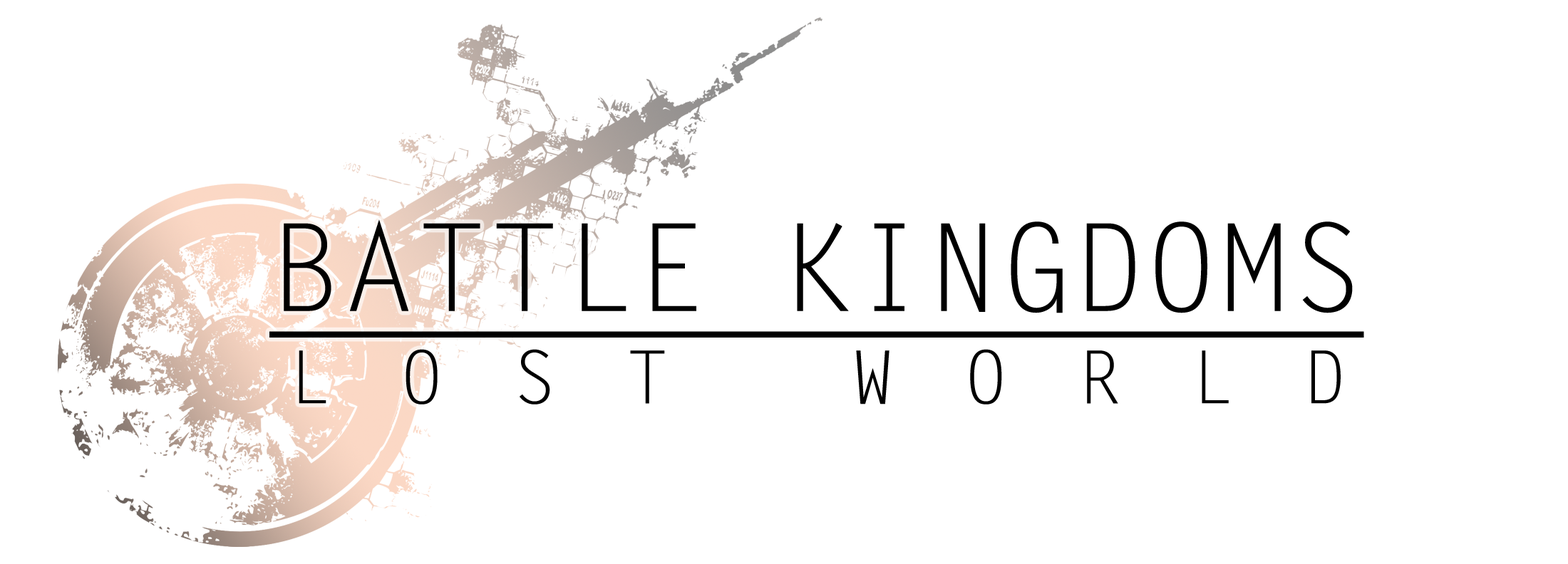
<style>
.page{position:relative;width:1568px;height:564px;background:#ffffff}
.page>*{position:absolute;margin:0}
.t1{font:121.6px "LetterGothicStd";color:#000000;text-decoration:underline}
.t2{font:73.3px "LetterGothicStd";letter-spacing:0.94em;color:#000000}
</style>
<div class="page">
<p class="t1" style="left:269px;top:220px;width:1095px;height:118px">BATTLE KINGDOMS</p>
<p class="t2" style="left:299px;top:349px;width:1042px;height:56px">LOST WORLD</p>
</div>
